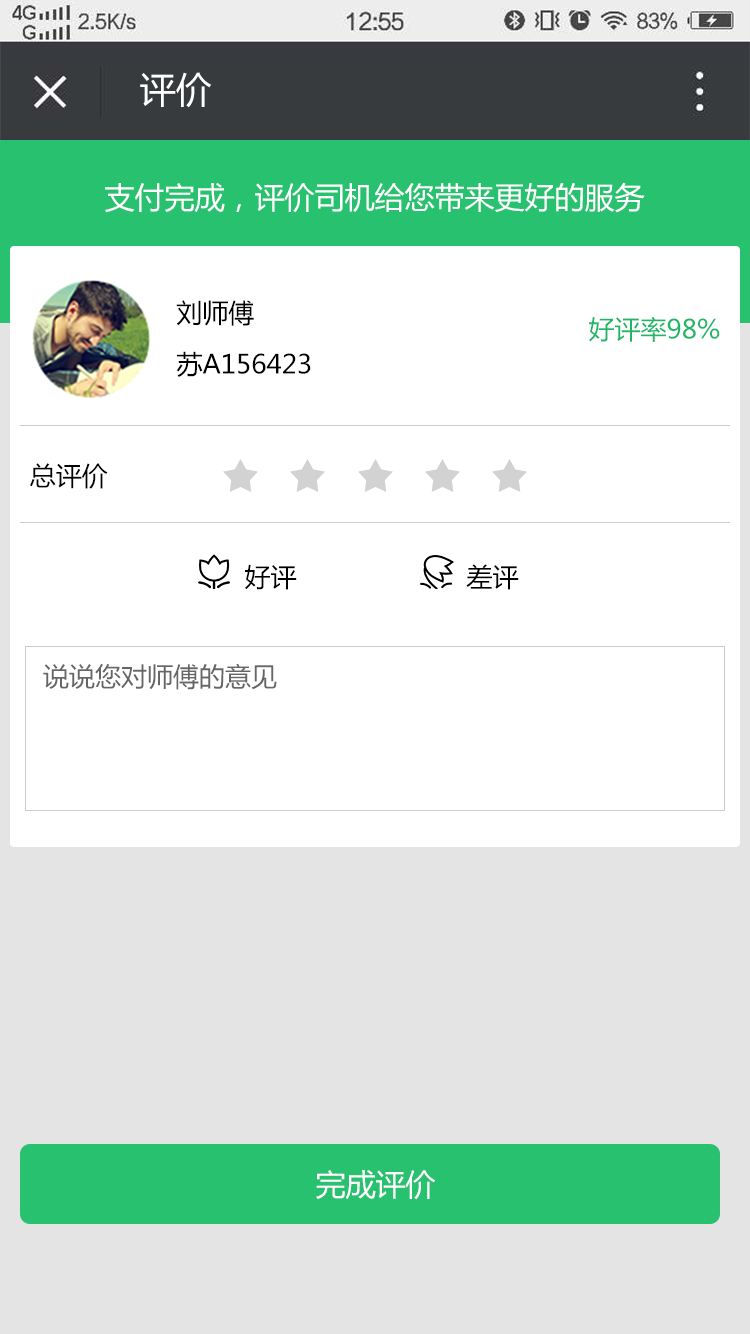
<style>
.page{position:relative;width:750px;height:1334px;background:#ffffff}
.page>*{position:absolute;margin:0}
.t1{font:36px "MicrosoftYaHei";color:#ffffff}
.t2{font:30px "MicrosoftYaHei";color:#ffffff}
.t3{font:26px "MicrosoftYaHei";color:#000000}
.t4{font:26px "MicrosoftYaHei";color:#1fb767}
.t5{font:26px "MicrosoftYaHei";color:#666666}
</style>
<div class="page">
<p class="t1" style="left:140px;top:72px;width:72px;height:36px">评价</p>
<p class="t2" style="left:105px;top:182px;width:540px;height:31px">支付完成，评价司机给您带来更好的服务</p>
<p class="t3" style="left:176px;top:300px;width:78px;height:26px">刘师傅</p>
<p class="t4" style="left:589px;top:316px;width:131px;height:26px">好评率98%</p>
<p class="t3" style="left:176px;top:351px;width:135px;height:26px">苏A156423</p>
<p class="t3" style="left:30px;top:463px;width:78px;height:26px">总评价</p>
<p class="t3" style="left:245px;top:564px;width:52px;height:26px">好评</p>
<p class="t3" style="left:466px;top:564px;width:53px;height:26px">差评</p>
<p class="t5" style="left:43px;top:663px;width:234px;height:27px">说说您对师傅的意见</p>
<p class="t2" style="left:316px;top:1170px;width:120px;height:30px">完成评价</p>
</div>
